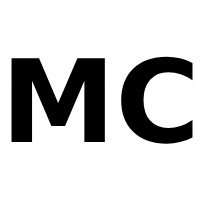
<style>
.page{position:relative;width:200px;height:200px;background:#ffffff}
.page>*{position:absolute;margin:0}
.t1{font:115px "DejaVuSans-Bold";color:#000000}
</style>
<div class="page">
<p class="t1" style="left:11px;top:56px;width:182px;height:88px">MC</p>
</div>
